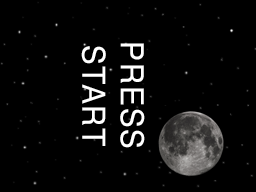
<style>
.page{position:relative;width:256px;height:192px;background:#000000}
.page>*{position:absolute;margin:0}
.t1{font:32.1px "Helvetica";letter-spacing:0.05em;color:#ffffff;scale:0.94 1}
</style>
<div class="page">
<p class="t1" style="left:81px;top:43px;width:64px;height:105px;text-align:center;rotate:90deg">PRESS<br>START</p>
</div>
